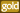
<style>
.page{position:relative;width:20px;height:13px;background:#ba931d}
.page>*{position:absolute;margin:0}
.t1{font:10px "2002L";letter-spacing:-0.05em;color:#ffffff;scale:0.9 1}
</style>
<div class="page">
<p class="t1" style="left:1px;top:1px;width:18px;height:11px">gold</p>
</div>
